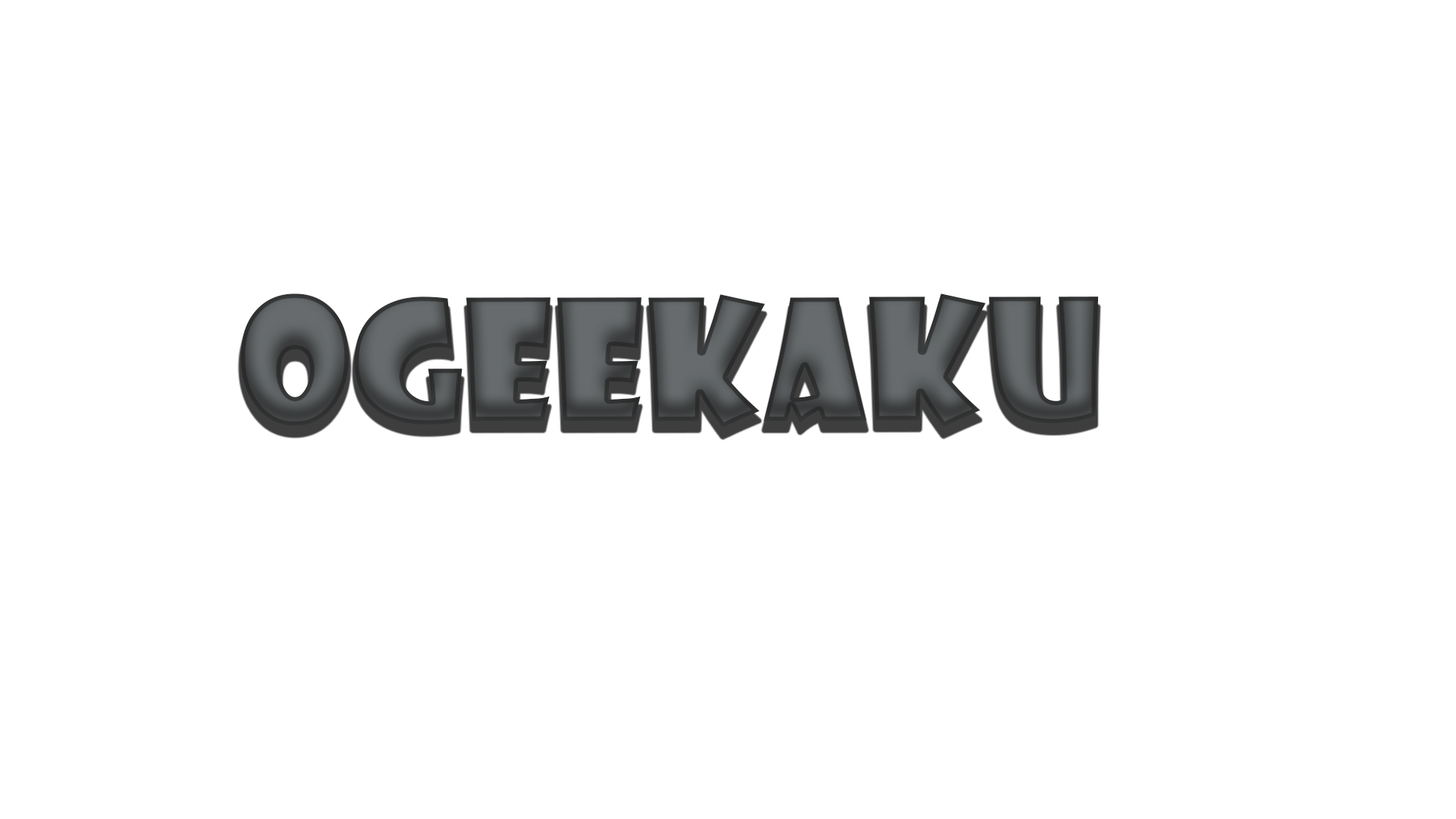
<style>
.page{position:relative;width:1456px;height:819px;background:#ffffff}
.page>*{position:absolute;margin:0}
.t1{font:164.2px "ShowcardGothic-Reg";color:#5b6062}
</style>
<div class="page">
<p class="t1" style="left:240px;top:293px;width:859px;height:135px;opacity:0.95">OGEEKAKU</p>
</div>
